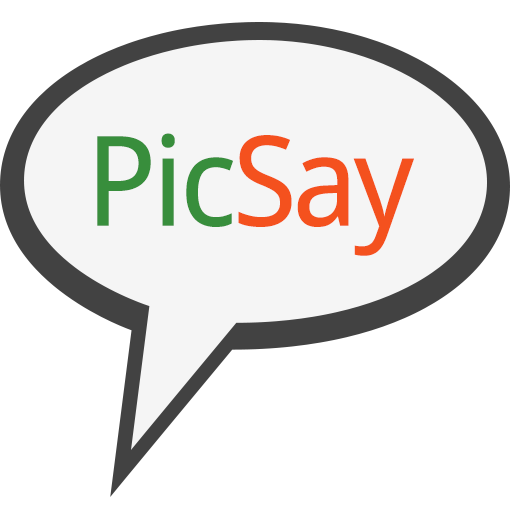
<style>
.page{position:relative;width:512px;height:512px;background:#ffffff}
.page>*{position:absolute;margin:0}
.t1{font:124.9px "DroidSans";letter-spacing:-0.04em;color:#388e3c}
.t2{font:124.9px "DroidSans";letter-spacing:-0.04em;color:#f4511e}
</style>
<div class="page">
<p class="t1" style="left:97px;top:133px;width:317px;height:123px">Pic<span class="t2">Say</span></p>
</div>
